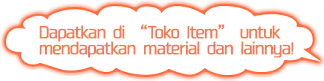
<style>
.page{position:relative;width:324px;height:81px;background:#ffffff}
.page>*{position:absolute;margin:0}
.t1{font:16px/16px "04KanjyukuGothic";letter-spacing:-0.08em;color:#fe754e;font-weight:bold}
</style>
<div class="page">
<p class="t1" style="left:39px;top:24px;width:255px;height:34px">Dapatkan di “Toko Item” untuk<br>mendapatkan material dan lainnya!</p>
</div>
